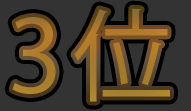
<style>
.page{position:relative;width:191px;height:111px;background:#333333}
.page>*{position:absolute;margin:0}
.t1{font:100px "KozGoPr6N-Regular";letter-spacing:0.1em;color:#ab7c2c}
</style>
<div class="page">
<p class="t1" style="left:12px;top:8px;width:158px;height:94px">3位</p>
</div>
